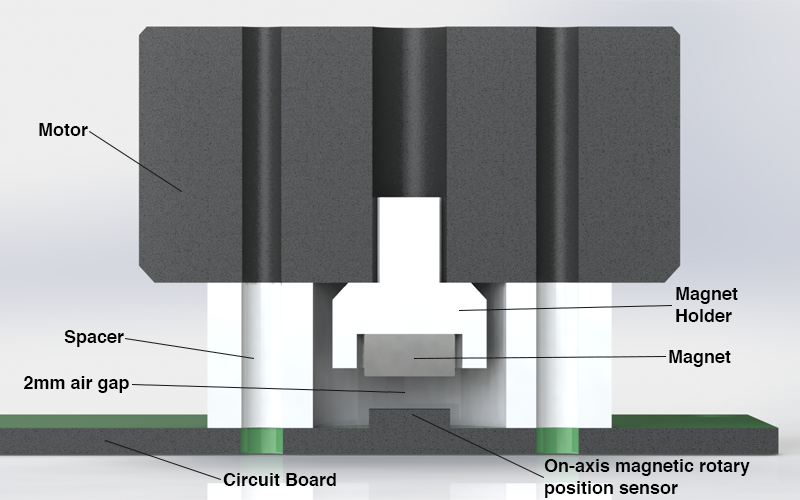
<style>
.page{position:relative;width:800px;height:500px}
.page>*{position:absolute;margin:0}
.t1{font:18px "Helvetica-Bold";color:#000000}
</style>
<div class="page">
<p class="t1" style="left:39px;top:123px;width:49px;height:13px">Motor</p>
<p class="t1" style="left:676px;top:287px;width:62px;height:35px">Magnet<br>Holder</p>
<p class="t1" style="left:64px;top:330px;width:60px;height:17px">Spacer</p>
<p class="t1" style="left:669px;top:350px;width:62px;height:17px">Magnet</p>
<p class="t1" style="left:24px;top:376px;width:105px;height:17px">2mm air gap</p>
<p class="t1" style="left:544px;top:459px;width:206px;height:39px">On-axis magnetic rotary<br>position sensor</p>
<p class="t1" style="left:223px;top:473px;width:113px;height:13px">Circuit Board</p>
</div>
